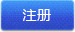
<style>
.page{position:relative;width:75px;height:32px}
.page>*{position:absolute;margin:0}
.t1{font:14px "MicrosoftYaHei";letter-spacing:0.025em;color:#ffffff}
</style>
<div class="page">
<p class="t1" style="left:22px;top:9px;width:29px;height:12px">注册</p>
</div>
